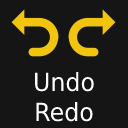
<style>
.page{position:relative;width:128px;height:128px;background:#151515}
.page>*{position:absolute;margin:0}
.t1{font:25px "DejaVuSans";color:#ffffff;scale:0.95 1}
</style>
<div class="page">
<p class="t1" style="left:35px;top:72px;width:59px;height:50px;text-align:center">Undo   Redo</p>
</div>
